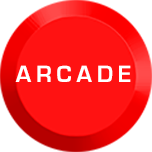
<style>
.page{position:relative;width:152px;height:152px;background:#ff1212}
.page>*{position:absolute;margin:0}
.t1{font:24.4px "EurostileBold";letter-spacing:0.2em;color:#ffffff}
</style>
<div class="page">
<p class="t1" style="left:15px;top:65px;width:116px;height:17px">ARCADE</p>
</div>
